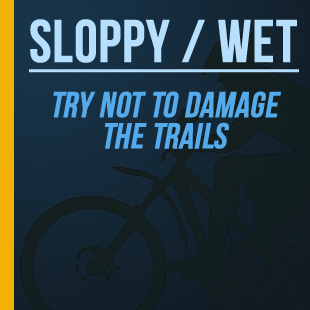
<style>
.page{position:relative;width:310px;height:310px}
.page>*{position:absolute;margin:0}
.t1{font:36px "BebasNeue";color:#55aaec;font-weight:bold;font-style:italic}
.t2{font:60px "BebasNeue";color:#b6dffe;font-weight:bold;text-decoration:underline}
</style>
<div class="page">
<p class="t1" style="left:29px;top:19px;width:270px;height:130px;text-align:center"><span class="t2">SLOPPY / Wet<br></span>Try Not to Damage<br>The Trails</p>
</div>
